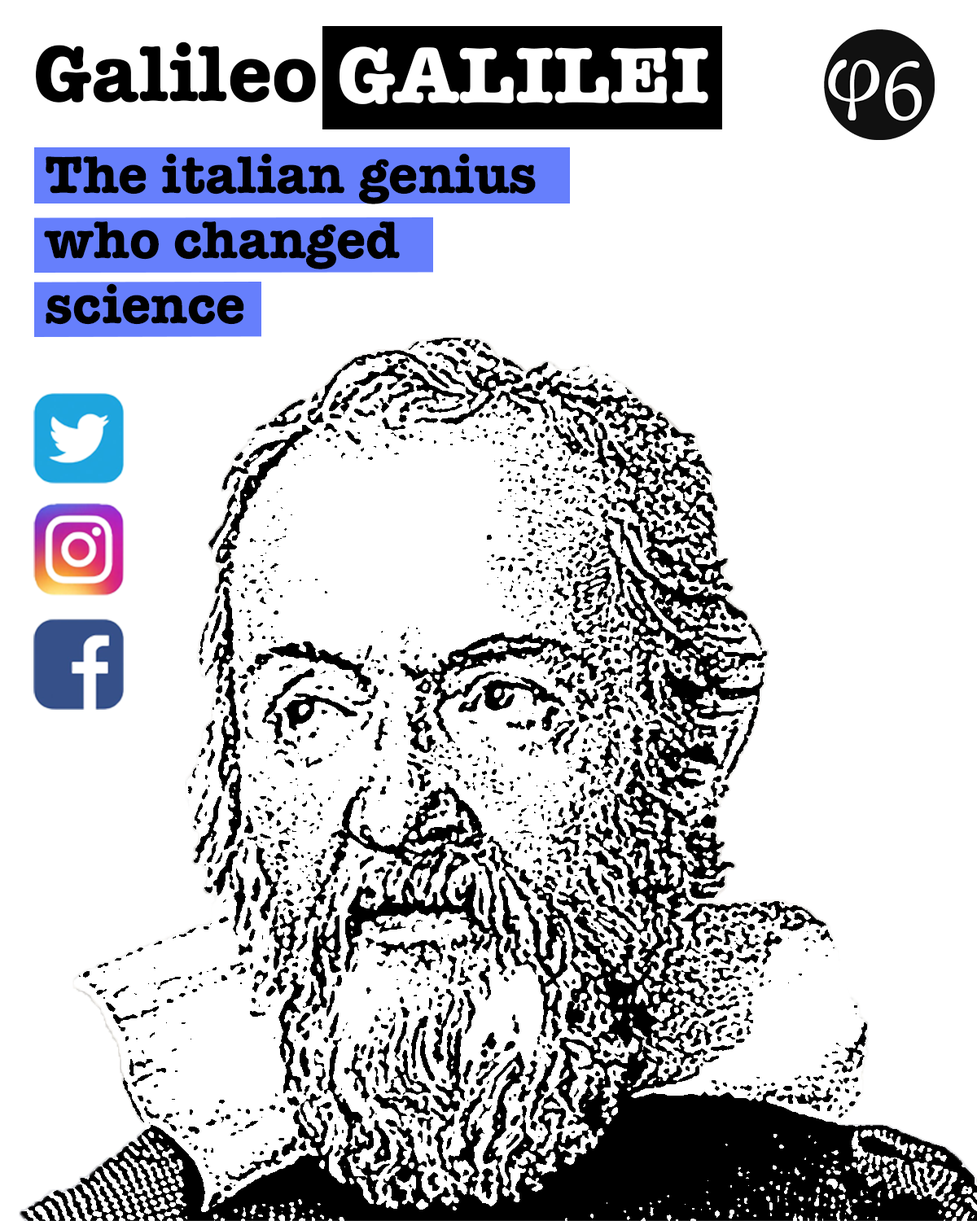
<style>
.page{position:relative;width:977px;height:1221px;background:#ffffff}
.page>*{position:absolute;margin:0}
.t1{font:81.4px "AmericanTypewriter-Bold";color:#000000}
.t2{font:81.4px "AmericanTypewriter-Bold";color:#ffffff}
.t3{font:54.3px "AmericanTypewriter-Bold";color:#000000}
</style>
<div class="page">
<p class="t1" style="left:36px;top:42px;width:280px;height:61px">Galileo</p>
<p class="t2" style="left:339px;top:46px;width:369px;height:58px">GALILEI</p>
<p class="t3" style="left:44px;top:153px;width:492px;height:172px">The italian genius <br>who changed <br>science</p>
</div>
